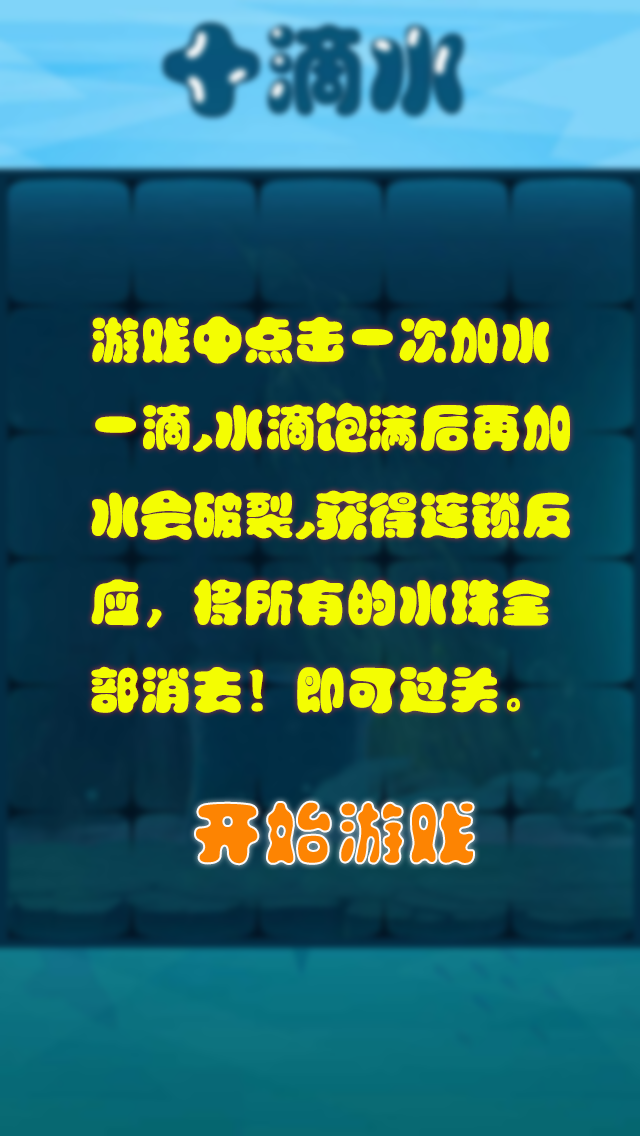
<style>
.page{position:relative;width:640px;height:1136px}
.page>*{position:absolute;margin:0}
.t1{font:50px "FZPTYJW--GB1-0";color:#f4fd02;font-weight:bold}
.t2{font:70px "FZPTYJW--GB1-0";color:#fd8402;font-weight:bold}
</style>
<div class="page">
<p class="t1" style="left:91px;top:316px;width:479px;height:398px">游戏中点击一次加水<br>一滴,水滴饱满后再加<br>水会破裂,获得连锁反<br>应，将所有的水珠全<br>部消去！即可过关。</p>
<p class="t2" style="left:194px;top:800px;width:281px;height:66px">开始游戏</p>
</div>
